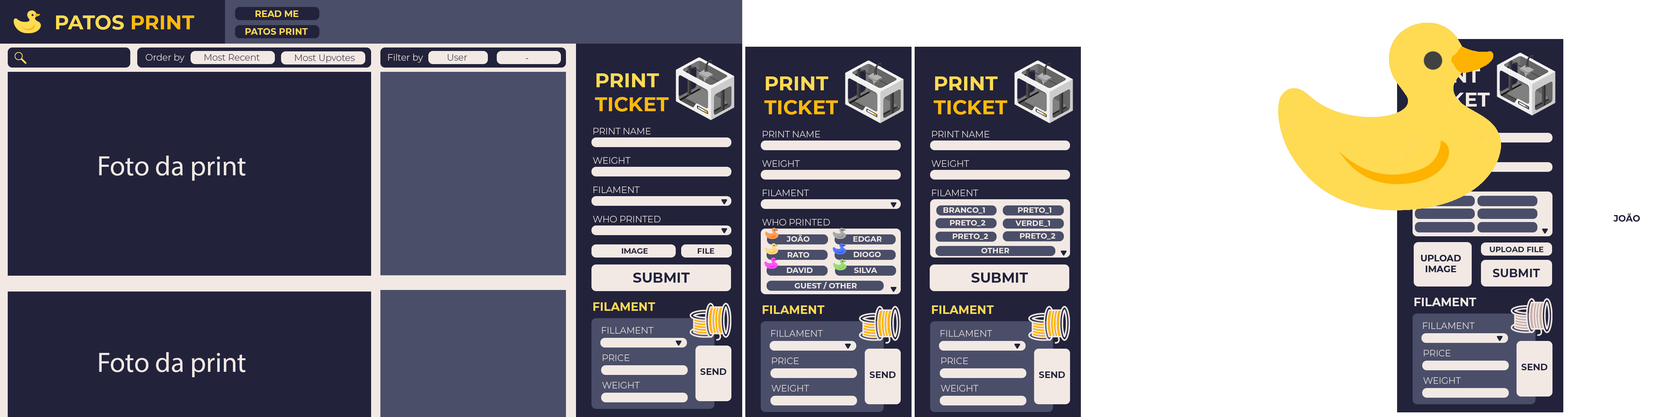
<style>
.page{position:relative;width:1670px;height:417px;background:#ffffff}
.page>*{position:absolute;margin:0}
.t1{font:20px "Montserrat-Bold";color:#ffdb53}
.t2{font:20px "Montserrat-Bold";color:#feb90c}
.t3{font:9px "Montserrat-Bold";color:#ffdb53}
.t4{font:9px "Montserrat-Light";color:#f2e9e4}
.t5{font:9px "Montserrat-Light";color:#22223b}
.t6{font:20px "Montserrat-Bold"}
.t7{font:27.8px "MyriadPro-Regular";color:#f2e9e4}
.t8{font:7.7px "Montserrat-Bold";color:#f2e9e4}
.t9{font:9px "Montserrat-Bold";color:#22223b}
.t10{font:7.7px "Montserrat-Bold";color:#22223b}
.t11{font:11.6px "Montserrat-Bold";color:#22223b}
.t12{font:13.9px "Montserrat-Bold";color:#22223b}
.t13{font:11.6px "Montserrat-Bold";color:#ffdb53}
.t14{font:11.6px "Montserrat-Bold";color:#f2e9e4}
</style>
<div class="page">
<p class="t1" style="left:56px;top:15px;width:138px;height:15px">PATOS <span class="t2">PRINT</span></p>
<p class="t3" style="left:255px;top:10px;width:43px;height:7px">READ ME</p>
<p class="t3" style="left:245px;top:28px;width:63px;height:7px">PATOS PRINT</p>
<p class="t4" style="left:146px;top:54px;width:38px;height:9px">Order by</p>
<p class="t4" style="left:388px;top:54px;width:35px;height:9px">Filter by</p>
<p class="t5" style="left:204px;top:54px;width:56px;height:7px">Most Recent</p>
<p class="t5" style="left:295px;top:54px;width:60px;height:9px">Most Upvotes</p>
<p class="t5" style="left:448px;top:54px;width:19px;height:7px">User</p>
<p class="t5" style="left:526px;top:58px;width:2px;height:1px">-</p>
<p class="t2" style="left:595px;top:73px;width:74px;height:39px"><span class="t1">PRINT<br></span>TICKET</p>
<p class="t2" style="left:764px;top:77px;width:74px;height:38px"><span class="t1">PRINT<br></span>TICKET</p>
<p class="t2" style="left:933px;top:77px;width:74px;height:38px"><span class="t1">PRINT<br></span>TICKET</p>
<p class="t6" style="left:1416px;top:69px;width:74px;height:38px">PRINT<br>TICKET</p>
<p class="t4" style="left:593px;top:128px;width:57px;height:7px">PRINT NAME</p>
<p class="t4" style="left:763px;top:131px;width:57px;height:7px">PRINT NAME</p>
<p class="t4" style="left:932px;top:131px;width:57px;height:7px">PRINT NAME</p>
<p class="t7" style="left:99px;top:156px;width:146px;height:25px">Foto da print</p>
<p class="t4" style="left:593px;top:157px;width:37px;height:7px">WEIGHT</p>
<p class="t4" style="left:762px;top:160px;width:38px;height:7px">WEIGHT</p>
<p class="t4" style="left:931px;top:160px;width:38px;height:7px">WEIGHT</p>
<p class="t4" style="left:593px;top:187px;width:47px;height:6px">FILAMENT</p>
<p class="t4" style="left:763px;top:190px;width:46px;height:6px">FILAMENT</p>
<p class="t4" style="left:932px;top:190px;width:46px;height:6px">FILAMENT</p>
<p class="t8" style="left:943px;top:208px;width:42px;height:6px">BRANCO_1</p>
<p class="t8" style="left:1018px;top:208px;width:33px;height:6px">PRETO_1</p>
<p class="t4" style="left:593px;top:216px;width:68px;height:7px">WHO PRINTED</p>
<p class="t4" style="left:762px;top:219px;width:68px;height:7px">WHO PRINTED</p>
<p class="t8" style="left:950px;top:220px;width:35px;height:6px">PRETO_2</p>
<p class="t8" style="left:1015px;top:221px;width:35px;height:6px">VERDE_1</p>
<p class="t9" style="left:1613px;top:213px;width:27px;height:9px">JOÃO</p>
<p class="t8" style="left:952px;top:234px;width:36px;height:6px">PRETO_2</p>
<p class="t8" style="left:1020px;top:233px;width:35px;height:7px">PRETO_2</p>
<p class="t8" style="left:786px;top:235px;width:23px;height:7px">JOÃO</p>
<p class="t8" style="left:853px;top:237px;width:29px;height:5px">EDGAR</p>
<p class="t10" style="left:621px;top:249px;width:27px;height:5px">IMAGE</p>
<p class="t10" style="left:698px;top:249px;width:16px;height:5px">FILE</p>
<p class="t8" style="left:787px;top:252px;width:22px;height:6px">RATO</p>
<p class="t8" style="left:853px;top:252px;width:28px;height:5px">DIOGO</p>
<p class="t8" style="left:981px;top:248px;width:28px;height:6px">OTHER</p>
<p class="t9" style="left:1421px;top:255px;width:40px;height:17px;text-align:center">UPLOAD<br>IMAGE</p>
<p class="t9" style="left:1421px;top:255px;width:40px;height:17px;text-align:center">UPLOAD<br>IMAGE</p>
<p class="t10" style="left:1490px;top:247px;width:53px;height:5px">UPLOAD FILE</p>
<p class="t8" style="left:787px;top:268px;width:25px;height:5px">DAVID</p>
<p class="t8" style="left:854px;top:268px;width:23px;height:5px">SILVA</p>
<p class="t11" style="left:1492px;top:269px;width:48px;height:9px">SUBMIT</p>
<p class="t12" style="left:633px;top:273px;width:57px;height:10px">SUBMIT</p>
<p class="t12" style="left:971px;top:273px;width:57px;height:10px">SUBMIT</p>
<p class="t8" style="left:794px;top:282px;width:63px;height:7px">GUEST / OTHER</p>
<p class="t13" style="left:593px;top:303px;width:62px;height:8px">FILAMENT</p>
<p class="t13" style="left:763px;top:306px;width:61px;height:8px">FILAMENT</p>
<p class="t13" style="left:932px;top:306px;width:62px;height:8px">FILAMENT</p>
<p class="t14" style="left:1414px;top:298px;width:62px;height:8px">FILAMENT</p>
<p class="t4" style="left:602px;top:327px;width:52px;height:7px">FILLAMENT</p>
<p class="t4" style="left:1423px;top:323px;width:51px;height:6px">FILLAMENT</p>
<p class="t4" style="left:771px;top:330px;width:52px;height:7px">FILLAMENT</p>
<p class="t4" style="left:940px;top:330px;width:52px;height:7px">FILLAMENT</p>
<p class="t7" style="left:99px;top:352px;width:146px;height:26px">Foto da print</p>
<p class="t4" style="left:1423px;top:350px;width:27px;height:7px">PRICE</p>
<p class="t4" style="left:603px;top:355px;width:26px;height:6px">PRICE</p>
<p class="t4" style="left:772px;top:358px;width:26px;height:6px">PRICE</p>
<p class="t4" style="left:941px;top:358px;width:27px;height:6px">PRICE</p>
<p class="t9" style="left:1521px;top:364px;width:26px;height:7px">SEND</p>
<p class="t9" style="left:700px;top:369px;width:26px;height:6px">SEND</p>
<p class="t9" style="left:869px;top:372px;width:27px;height:6px">SEND</p>
<p class="t9" style="left:1039px;top:372px;width:26px;height:6px">SEND</p>
<p class="t4" style="left:1423px;top:378px;width:38px;height:6px">WEIGHT</p>
<p class="t4" style="left:602px;top:382px;width:38px;height:7px">WEIGHT</p>
<p class="t4" style="left:771px;top:385px;width:38px;height:7px">WEIGHT</p>
<p class="t4" style="left:941px;top:385px;width:37px;height:7px">WEIGHT</p>
</div>
